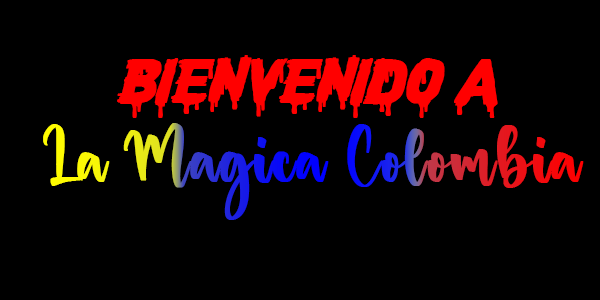
<style>
.page{position:relative;width:600px;height:300px;background:#000000}
.page>*{position:absolute;margin:0}
.t1{font:60.3px "CFNightofTerrorPERSONAL-Reg";color:#ff0000;font-weight:bold}
.t2{font:55px "Danisha-Regular";font-weight:bold;scale:0.91 1}
</style>
<div class="page">
<p class="t1" style="left:117px;top:55px;width:381px;height:63px">bienvenido a</p>
<p class="t2" style="left:43px;top:123px;width:541px;height:97px">La Magica Colombia</p>
</div>
